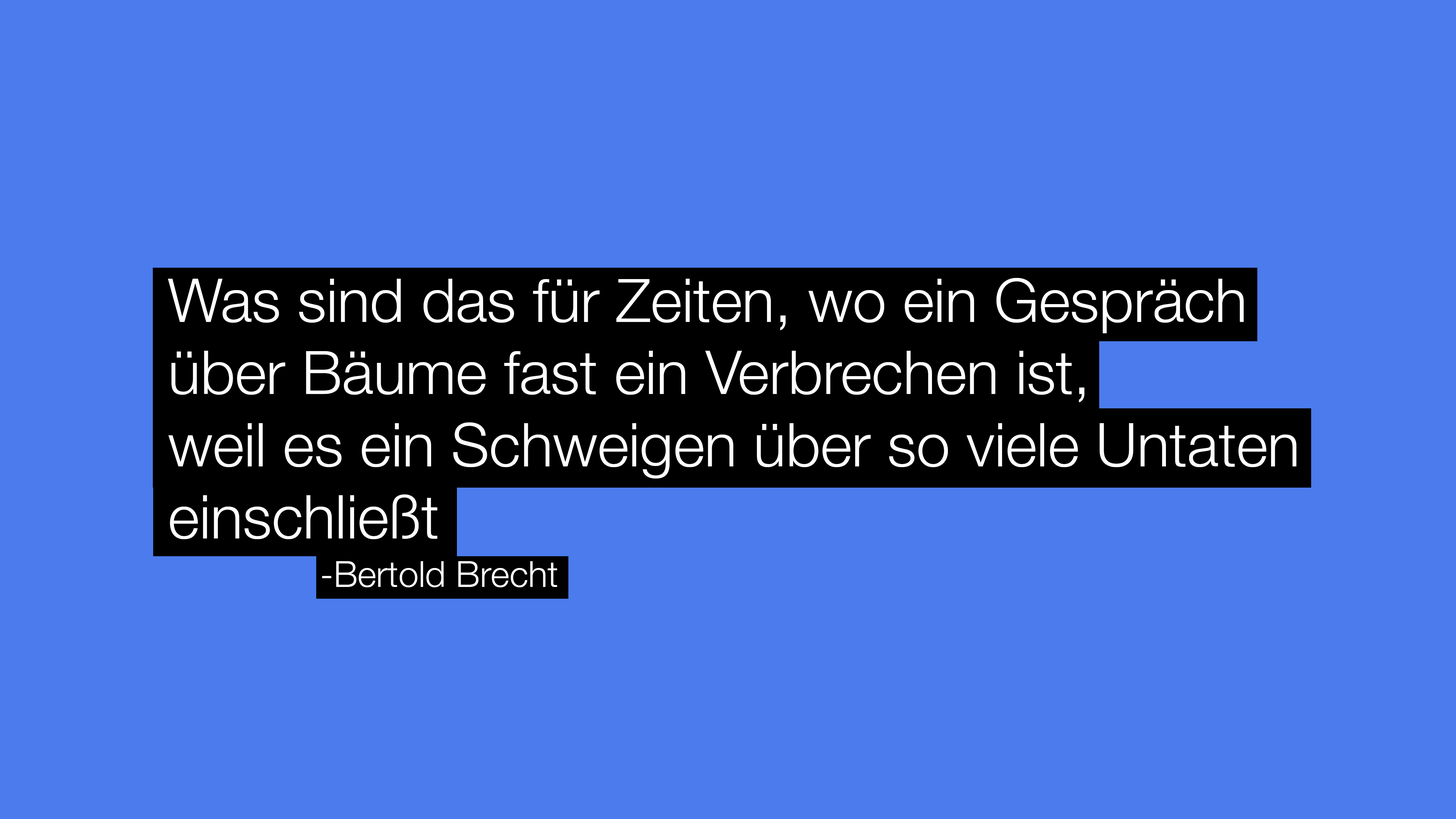
<style>
.page{position:relative;width:1456px;height:819px;background:#4b7bec}
.page>*{position:absolute;margin:0}
.t1{font:60.2px "HelveticaNeue-Light";color:#ffffff}
.t2{font:36.1px "HelveticaNeue-Light";color:#ffffff}
</style>
<div class="page">
<p class="t1" style="left:168px;top:278px;width:1128px;height:261px">Was sind das für Zeiten, wo ein Gespräch <br>über Bäume fast ein Verbrechen ist, <br>weil es ein Schweigen über so viele Untaten<br>einschließt</p>
<p class="t2" style="left:322px;top:561px;width:235px;height:26px">-Bertold Brecht</p>
</div>
